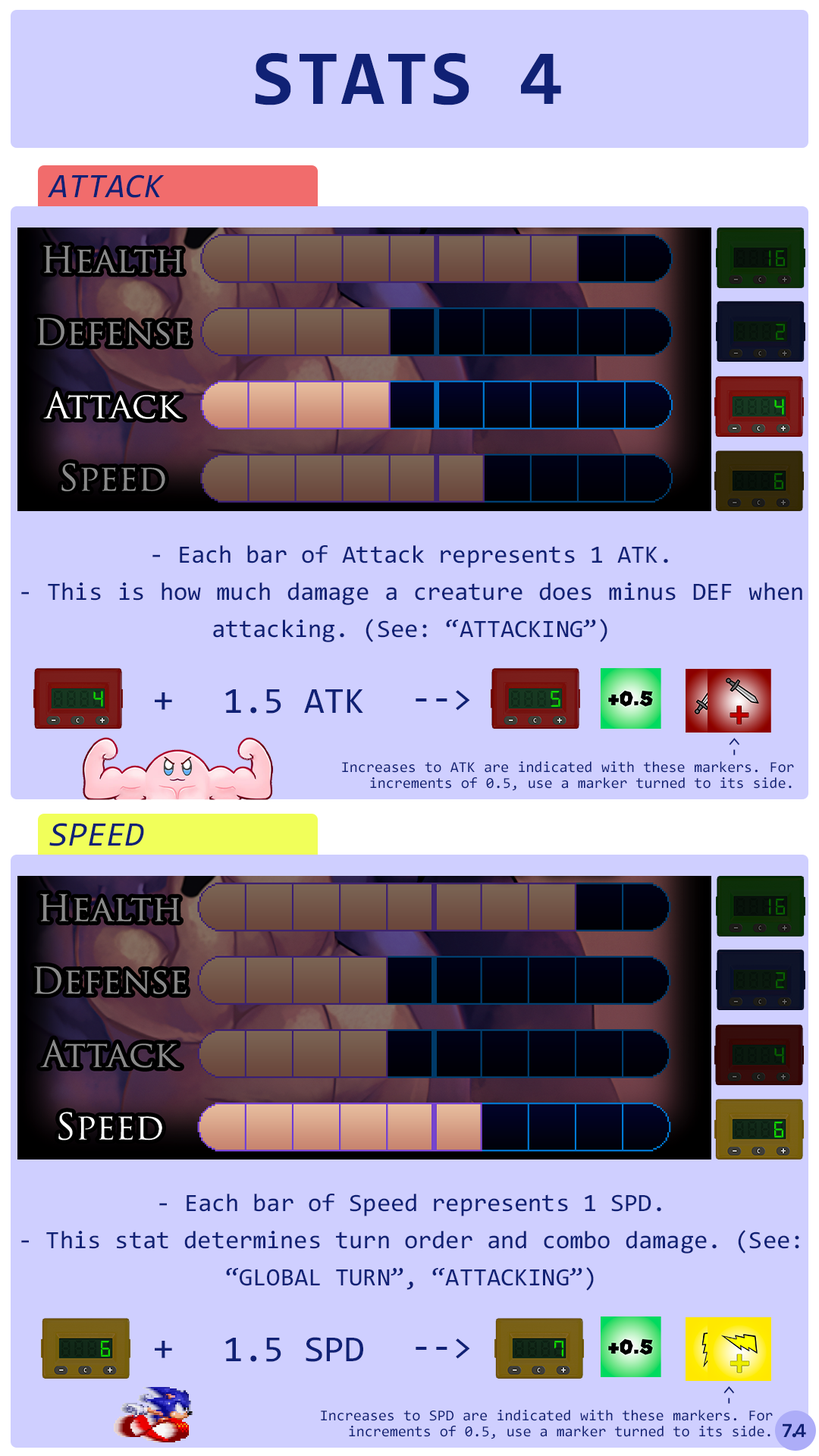
<style>
.page{position:relative;width:819px;height:1456px;background:#cfcfff}
.page>*{position:absolute;margin:0}
.t1{font:78.3px "Consolas-Bold";letter-spacing:0.02em;color:#102175}
.t2{font:34.3px "Consolas-Italic";color:#102175}
.t3{font:24.4px "Digital-7";letter-spacing:0.12em;color:#086100}
.t4{font:24.4px "Digital-7";letter-spacing:0.12em;color:#12dc01}
.t5{font:25px/37.2px "Consolas";color:#102175}
.t6{font:36.7px "Consolas";color:#102175}
.t7{font:19.1px "Consolas";color:#102175}
.t8{font:15.2px/15.9px "Consolas";color:#102175}
.t9{font:20.5px "Consolas-Bold";letter-spacing:-0.2em;color:#102175}
.t10{font:20.5px "Consolas-Bold";letter-spacing:-0.22em;color:#102175}
.t11{font:20.5px "Consolas-Bold";letter-spacing:-0.06em;color:#102175}
</style>
<div class="page">
<p class="t1" style="left:255px;top:53px;width:306px;height:52px">STATS 4</p>
<p class="t2" style="left:48px;top:174px;width:117px;height:24px">ATTACK</p>
<p class="t3" style="left:769px;top:250px;width:16px;height:16px">16</p>
<p class="t3" style="left:776px;top:324px;width:9px;height:16px">2</p>
<p class="t4" style="left:774px;top:399px;width:10px;height:16px">4</p>
<p class="t3" style="left:774px;top:473px;width:9px;height:16px">6</p>
<p class="t5" style="left:21px;top:545px;width:781px;height:97px;text-align:justify">- Each bar of Attack represents 1 ATK.<br>- This is how much damage a creature does minus DEF when attacking. (See: “ATTACKING”)</p>
<p class="t6" style="left:225px;top:689px;width:138px;height:25px">1.5 ATK</p>
<p class="t4" style="left:93px;top:691px;width:10px;height:16px">4</p>
<p class="t6" style="left:155px;top:692px;width:17px;height:18px">+</p>
<p class="t6" style="left:416px;top:690px;width:54px;height:21px">--&gt;</p>
<p class="t4" style="left:551px;top:691px;width:9px;height:16px">5</p>
<p class="t7" style="left:729px;top:738px;width:11px;height:17px;rotate:-90deg">-&gt;</p>
<p class="t8" style="left:342px;top:761px;width:452px;height:30px;text-align:justify">Increases to ATK are indicated with these markers. For increments of 0.5, use a marker turned to its side.</p>
<p class="t2" style="left:49px;top:823px;width:95px;height:23px">SPEED</p>
<p class="t3" style="left:769px;top:899px;width:16px;height:16px">16</p>
<p class="t3" style="left:776px;top:972px;width:9px;height:16px">2</p>
<p class="t3" style="left:774px;top:1047px;width:10px;height:16px">4</p>
<p class="t4" style="left:774px;top:1122px;width:9px;height:15px">6</p>
<p class="t5" style="left:21px;top:1194px;width:778px;height:97px;text-align:justify">- Each bar of Speed represents 1 SPD.<br>- This stat determines turn order and combo damage. (See: “GLOBAL TURN”, “ATTACKING”)</p>
<p class="t6" style="left:225px;top:1337px;width:138px;height:25px">1.5 SPD</p>
<p class="t4" style="left:101px;top:1341px;width:9px;height:16px">6</p>
<p class="t6" style="left:155px;top:1341px;width:17px;height:17px">+</p>
<p class="t6" style="left:416px;top:1338px;width:54px;height:21px">--&gt;</p>
<p class="t4" style="left:554px;top:1341px;width:9px;height:16px">7</p>
<p class="t7" style="left:723px;top:1386px;width:12px;height:18px;rotate:-90deg">-&gt;</p>
<p class="t8" style="left:321px;top:1410px;width:452px;height:29px;text-align:justify">Increases to SPD are indicated with these markers. For increments of 0.5, use a marker turned to its side.</p>
<p class="t9" style="left:783px;top:1423px;width:23px;height:15px">7<span class="t10">.</span><span class="t11">4</span></p>
</div>
